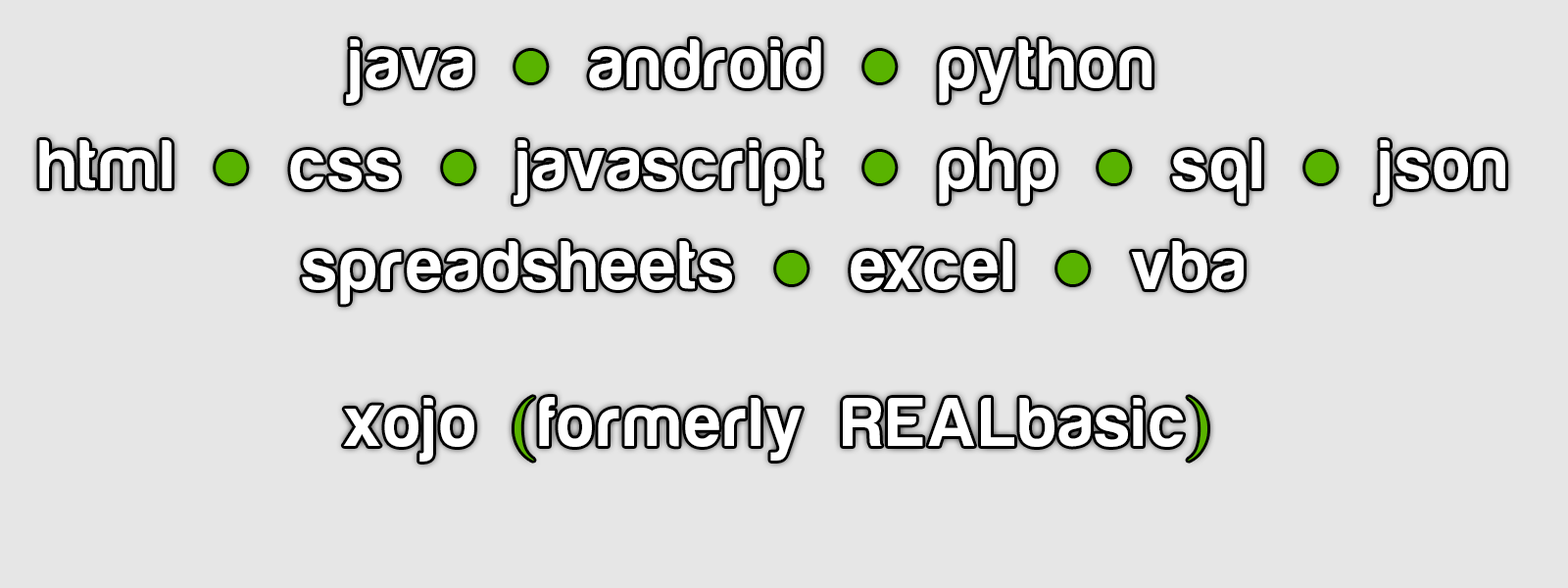
<style>
.page{position:relative;width:1568px;height:588px;background:#e6e6e6}
.page>*{position:absolute;margin:0}
.t1{font:70.6px "HarabaraMaisBold-HarabaraMaisBold";letter-spacing:0.02em;color:#ffffff}
.t2{font:70.6px "TimesNewRomanPSMT";letter-spacing:0.02em;color:#59b300}
</style>
<div class="page">
<p class="t1" style="left:346px;top:39px;width:806px;height:64px">java <span class="t2">●</span> android <span class="t2">●</span> python</p>
<p class="t1" style="left:39px;top:140px;width:1466px;height:64px">html <span class="t2">●</span> css <span class="t2">●</span> javascript <span class="t2">●</span> php <span class="t2">●</span> sql <span class="t2">●</span> json</p>
<p class="t1" style="left:302px;top:241px;width:942px;height:64px">spreadsheets <span class="t2">●</span> excel <span class="t2">●</span> vba</p>
<p class="t1" style="left:343px;top:397px;width:864px;height:65px">xojo <span class="t2">(</span>formerly REALbasic<span class="t2">)</span></p>
</div>
